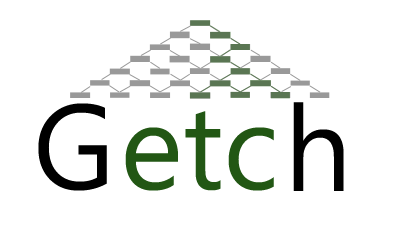
<style>
.page{position:relative;width:400px;height:250px;background:#ffffff}
.page>*{position:absolute;margin:0}
.t1{font:120px "Ebrima";color:#000000}
.t2{font:120px "Ebrima";color:#225714}
</style>
<div class="page">
<p class="t1" style="left:293px;top:102px;width:51px;height:89px">h</p>
<p class="t1" style="left:38px;top:103px;width:69px;height:88px">G</p>
<p class="t2" style="left:125px;top:111px;width:149px;height:80px">etc</p>
</div>
